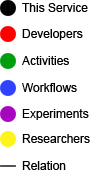
<style>
.page{position:relative;width:90px;height:170px;background:#ffffff}
.page>*{position:absolute;margin:0}
.t1{font:12px "ArialMT";color:#000000}
</style>
<div class="page">
<p class="t1" style="left:22px;top:3px;width:66px;height:9px">This Service</p>
<p class="t1" style="left:22px;top:29px;width:61px;height:11px">Developers</p>
<p class="t1" style="left:22px;top:56px;width:47px;height:9px">Activities</p>
<p class="t1" style="left:22px;top:83px;width:55px;height:9px">Workflows</p>
<p class="t1" style="left:22px;top:109px;width:67px;height:11px">Experiments</p>
<p class="t1" style="left:22px;top:134px;width:68px;height:9px">Researchers</p>
<p class="t1" style="left:22px;top:161px;width:44px;height:9px">Relation</p>
</div>
